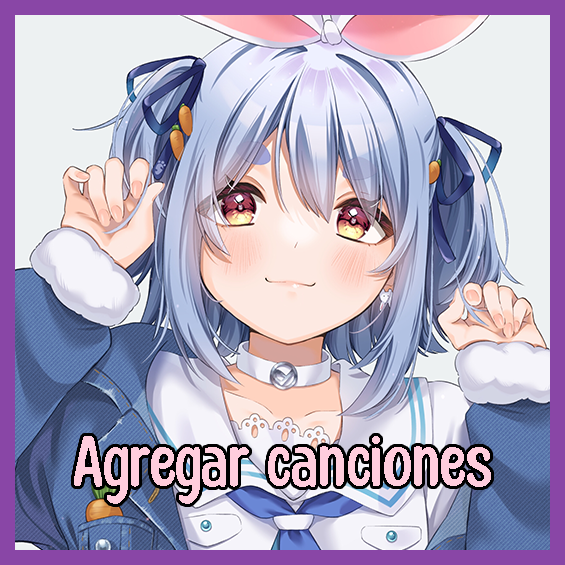
<style>
.page{position:relative;width:565px;height:565px}
.page>*{position:absolute;margin:0}
.t1{font:78.6px "HoneyNotes-Regular";color:#ffcddd}
</style>
<div class="page">
<p class="t1" style="left:74px;top:436px;width:417px;height:68px">Agregar canciones</p>
</div>
